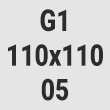
<style>
.page{position:relative;width:110px;height:110px;background:#e5e5e5}
.page>*{position:absolute;margin:0}
.t1{font:30px/34.7px "Roboto-Black";color:#2c2c2c;scale:0.82 1}
</style>
<div class="page">
<p class="t1" style="left:8px;top:9px;width:95px;height:92px;text-align:center">G1<br>110x110<br>05</p>
</div>
